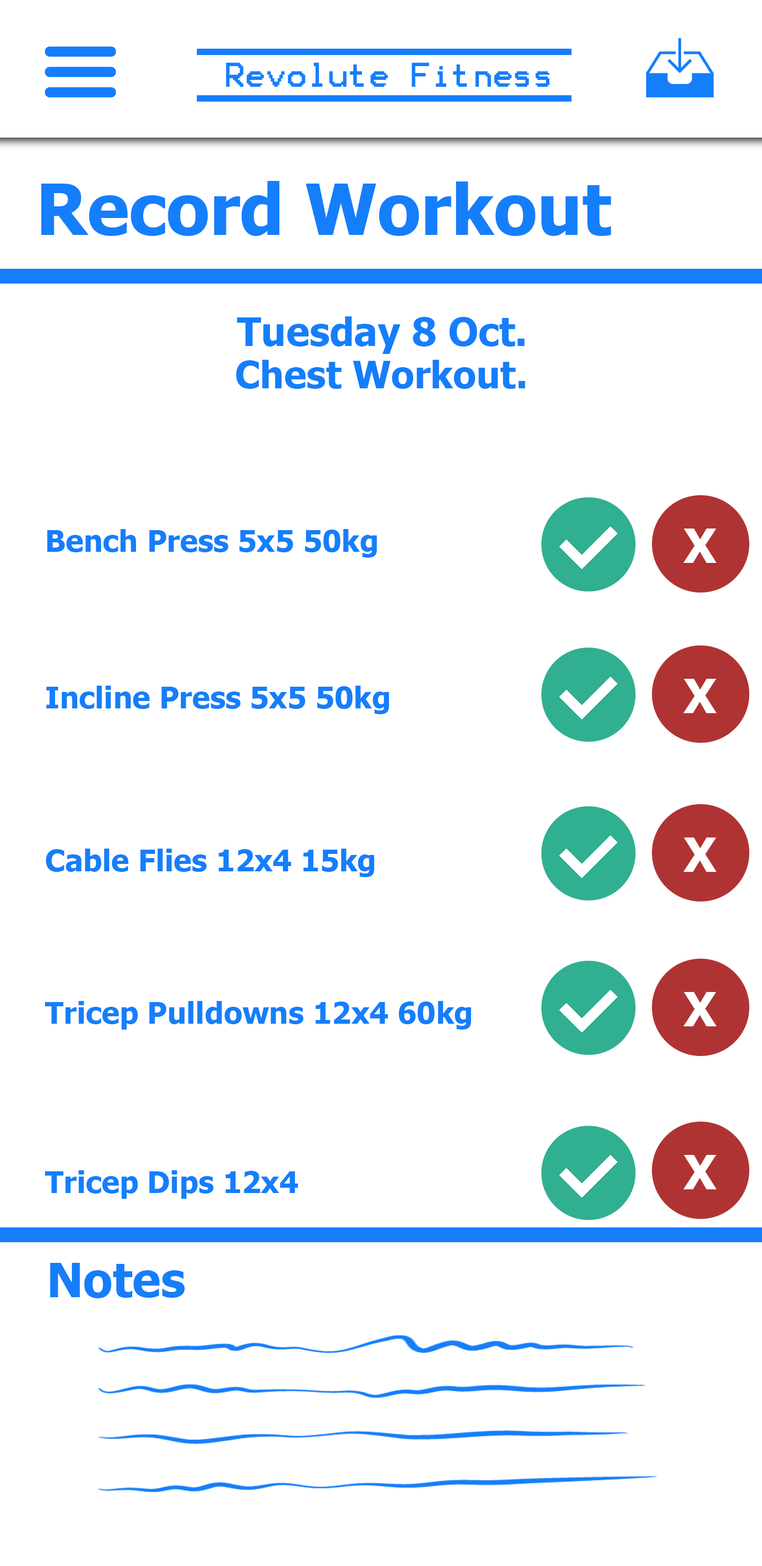
<style>
.page{position:relative;width:762px;height:1566px;background:#ffffff}
.page>*{position:absolute;margin:0}
.t1{font:27.5px "Terminal";color:#157efb}
.t2{font:70.3px "Tahoma-Bold";color:#157efb}
.t3{font:39.1px "Tahoma-Bold";color:#157efb}
.t4{font:37.6px "Tahoma-Bold";color:#157efb}
.t5{font:30.1px "Tahoma-Bold";color:#157efb}
.t6{font:47.6px "Tahoma-Bold";color:#157efb}
</style>
<div class="page">
<p class="t1" style="left:226px;top:62px;width:324px;height:25px">Revolute Fitness</p>
<p class="t2" style="left:41px;top:181px;width:570px;height:55px">Record Workout</p>
<p class="t3" style="left:237px;top:316px;width:287px;height:38px">Tuesday 8 Oct.</p>
<p class="t4" style="left:236px;top:360px;width:289px;height:29px">Chest Workout.</p>
<p class="t5" style="left:47px;top:529px;width:330px;height:28px">Bench Press 5x5 50kg</p>
<p class="t5" style="left:46px;top:685px;width:343px;height:29px">Incline Press 5x5 50kg</p>
<p class="t5" style="left:45px;top:848px;width:329px;height:29px">Cable Flies 12x4 15kg</p>
<p class="t5" style="left:45px;top:1001px;width:426px;height:28px">Tricep Pulldowns 12x4 60kg</p>
<p class="t5" style="left:45px;top:1170px;width:253px;height:29px">Tricep Dips 12x4</p>
<p class="t6" style="left:50px;top:1263px;width:135px;height:35px">Notes</p>
</div>
